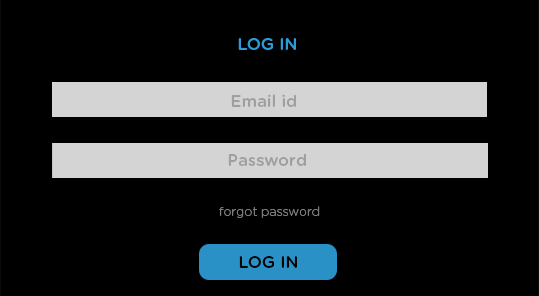
<style>
.page{position:relative;width:539px;height:296px;background:#000000}
.page>*{position:absolute;margin:0}
.t1{font:16.7px "GothamRounded-Medium";color:#2d9bd5}
.t2{font:16.7px "GothamRounded-Medium";color:#9f9f9f}
.t3{font:12.5px "GothamRounded-Light";color:#7c7c7c}
.t4{font:16.7px "GothamRounded-Medium";color:#030304}
</style>
<div class="page">
<p class="t1" style="left:238px;top:38px;width:58px;height:12px">LOG IN</p>
<p class="t2" style="left:231px;top:94px;width:65px;height:13px">Email id</p>
<p class="t2" style="left:228px;top:153px;width:78px;height:13px">Password</p>
<p class="t3" style="left:219px;top:206px;width:101px;height:12px">forgot password</p>
<p class="t4" style="left:239px;top:256px;width:58px;height:12px">LOG IN</p>
</div>
